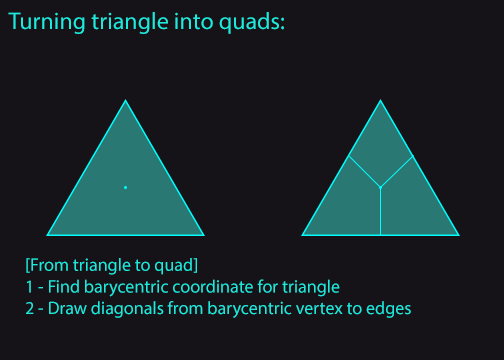
<style>
.page{position:relative;width:504px;height:360px;background:#151317}
.page>*{position:absolute;margin:0}
.t1{font:24px "MyriadPro-Regular";color:#1ee9dd}
.t2{font:18px "MyriadPro-Regular";color:#1ee9dd}
</style>
<div class="page">
<p class="t1" style="left:8px;top:12px;width:276px;height:22px">Turning triangle into quads:</p>
<p class="t2" style="left:26px;top:258px;width:385px;height:60px">[From triangle to quad]<br>1 - Find barycentric coordinate for triangle<br>2 - Draw diagonals from barycentric vertex to edges</p>
</div>
